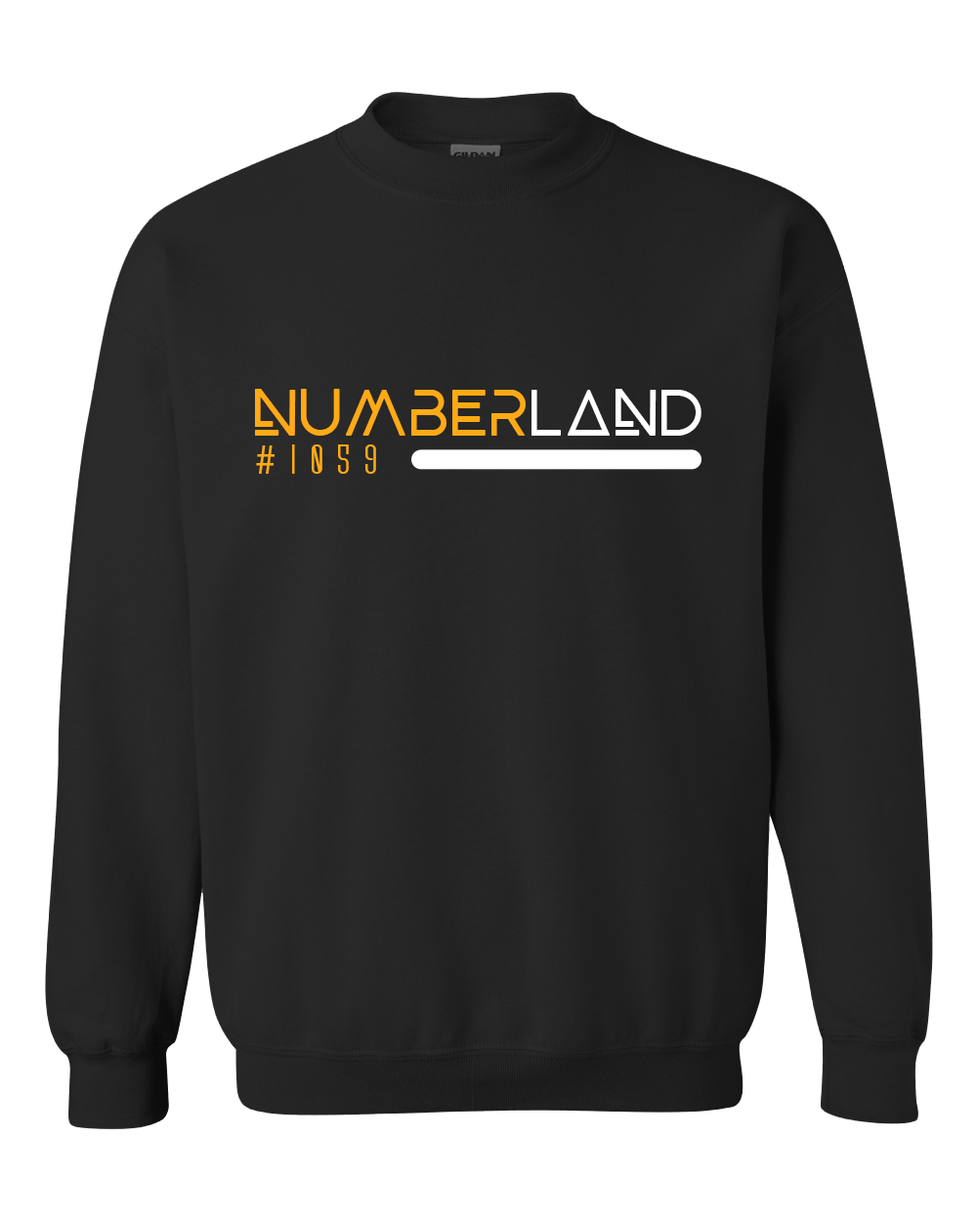
<style>
.page{position:relative;width:977px;height:1221px;background:#ffffff}
.page>*{position:absolute;margin:0}
.t1{font:64.9px "BEYNO";color:#ffaa15}
.t2{font:64.9px "BEYNO";color:#ffffff}
.t3{font:42.2px "MyriadPro-Regular";color:#ffaa15}
.t4{font:38.9px "ScantypeBoldPERSONALUSE";color:#ffaa15}
</style>
<div class="page">
<p class="t1" style="left:255px;top:389px;width:446px;height:47px">NUMBER<span class="t2">LAND</span></p>
<p class="t3" style="left:256px;top:445px;width:18px;height:29px">#</p>
<p class="t4" style="left:292px;top:444px;width:84px;height:30px">9  5  0  1</p>
</div>
